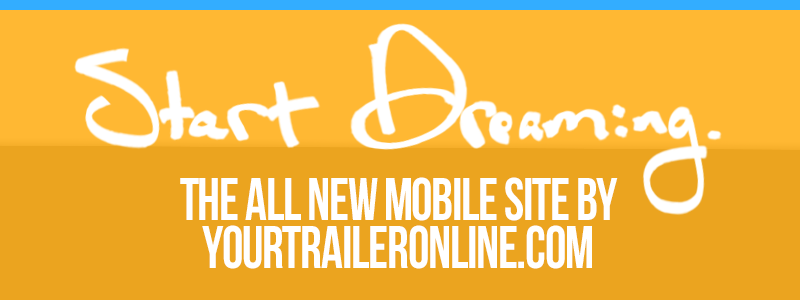
<style>
.page{position:relative;width:800px;height:300px;background:#eba41f}
.page>*{position:absolute;margin:0}
.t1{font:60px "BebasNeue";letter-spacing:-0.02em;color:#ffffff;scale:0.9 1}
</style>
<div class="page">
<p class="t1" style="left:180px;top:177px;width:438px;height:92px">The all new mobile site by yourtraileronline.com</p>
</div>
